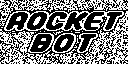
<style>
.page{position:relative;width:128px;height:64px;background:#000000}
.page>*{position:absolute;margin:0}
.t1{font:26.7px "Legothick";letter-spacing:-0.08em;color:#ffffff;scale:1.61 1}
.t2{font:26.7px "Legothick";color:#ffffff;scale:1.61 1}
</style>
<div class="page">
<p class="t1" style="left:4px;top:11px;width:120px;height:20px">ROCKET</p>
<p class="t2" style="left:28px;top:33px;width:70px;height:20px">BOT</p>
</div>
